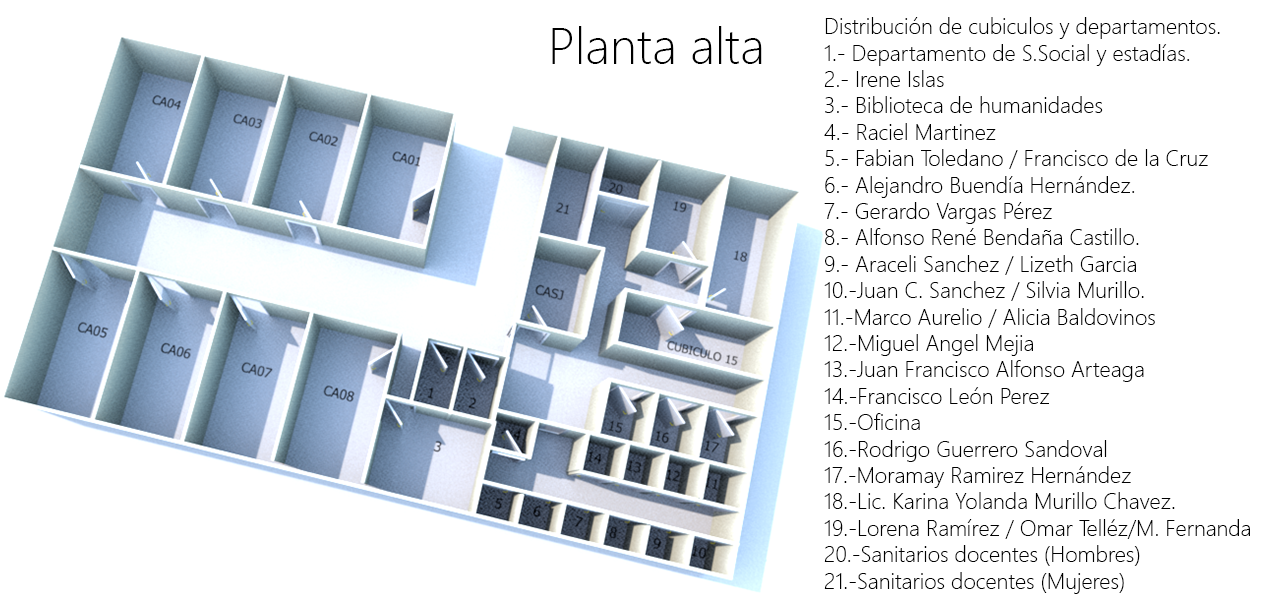
<style>
.page{position:relative;width:1275px;height:601px;background:#ffffff}
.page>*{position:absolute;margin:0}
.t1{font:22px "SegoeUI-Light";color:#000000}
.t2{font:50px "SegoeUI-Light";color:#000000}
</style>
<div class="page">
<p class="t1" style="left:824px;top:17px;width:426px;height:577px">Distribución de cubiculos y departamentos.<br>1.- Departamento de S.Social y estadías.<br>2.- Irene Islas<br>3.- Biblioteca de humanidades<br>4.- Raciel Martinez<br>5.- Fabian Toledano / Francisco de la Cruz <br>6.- Alejandro Buendía Hernández.<br>7.- Gerardo Vargas Pérez<br>8.- Alfonso René Bendaña Castillo.<br>9.- Araceli Sanchez / Lizeth Garcia<br>10.-Juan C. Sanchez / Silvia Murillo.<br>11.-Marco Aurelio / Alicia Baldovinos<br>12.-Miguel Angel Mejia <br>13.-Juan Francisco Alfonso Arteaga<br>14.-Francisco León Perez <br>15.-Oficina<br>16.-Rodrigo Guerrero Sandoval<br>17.-Moramay Ramirez Hernández<br>18.-Lic. Karina Yolanda Murillo Chavez.<br>19.-Lorena Ramírez / Omar Telléz/M. Fernanda<br>20.-Sanitarios docentes (Hombres)<br>21.-Sanitarios docentes (Mujeres)</p>
<p class="t2" style="left:552px;top:26px;width:210px;height:38px">Planta alta</p>
</div>
